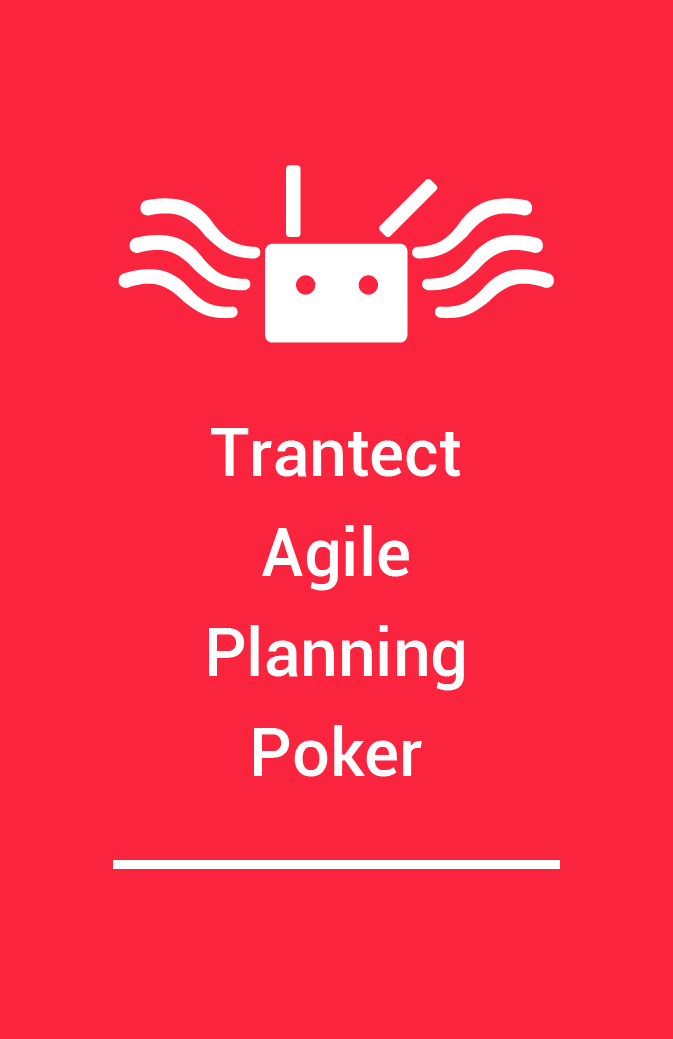
<style>
.page{position:relative;width:673px;height:1039px;background:#fa243e}
.page>*{position:absolute;margin:0}
.t1{font:66.7px/100px "Roboto-Medium";color:#ffffff}
</style>
<div class="page">
<p class="t1" style="left:209px;top:428px;width:255px;height:349px;text-align:center">Trantect<br>Agile<br>Planning<br>Poker</p>
</div>
